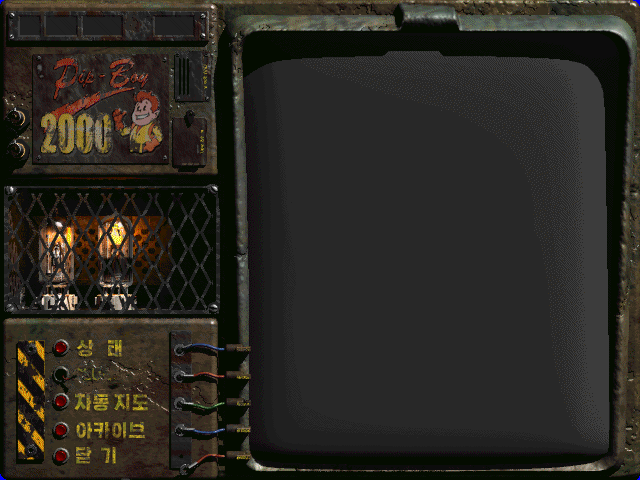
<style>
.page{position:relative;width:640px;height:480px;background:#282828}
.page>*{position:absolute;margin:0}
.t1{font:18px "HakgyoansimPosterB"}
</style>
<div class="page">
<p class="t1" style="left:76px;top:340px;width:46px;height:17px">상   태</p>
<p class="t1" style="left:74px;top:394px;width:74px;height:17px">자동 지도</p>
<p class="t1" style="left:76px;top:422px;width:69px;height:17px">아카이브</p>
<p class="t1" style="left:76px;top:447px;width:40px;height:17px">닫  기</p>
</div>
